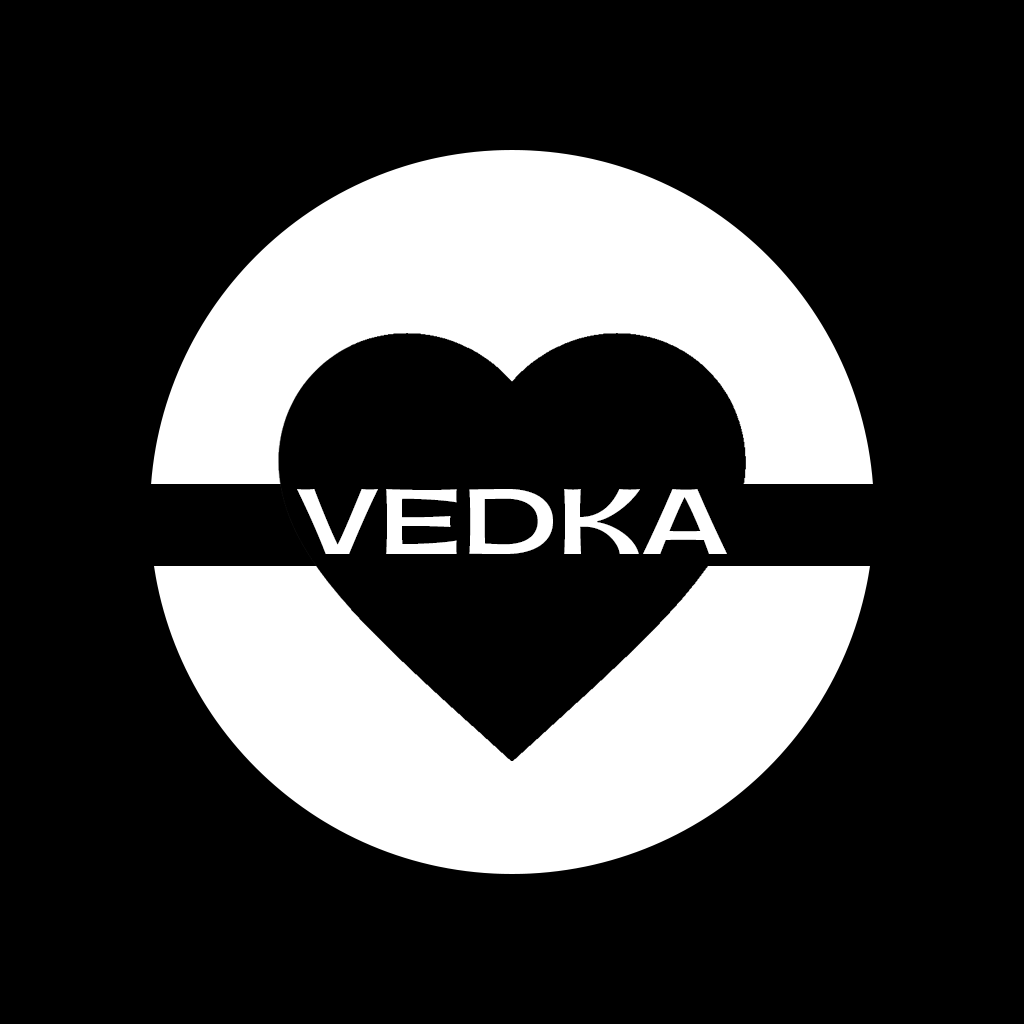
<style>
.page{position:relative;width:1024px;height:1024px;background:#000000}
.page>*{position:absolute;margin:0}
.t1{font:87.5px "Gatwick-Bold";color:#ffffff}
</style>
<div class="page">
<p class="t1" style="left:297px;top:489px;width:430px;height:65px">VEDKA</p>
</div>
